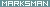
<style>
.page{position:relative;width:50px;height:7px;background:#639598}
.page>*{position:absolute;margin:0}
.t1{font:8px "5x5-Pixel";color:#f8fff9}
</style>
<div class="page">
<p class="t1" style="left:2px;top:1px;width:46px;height:5px">marksman</p>
</div>
